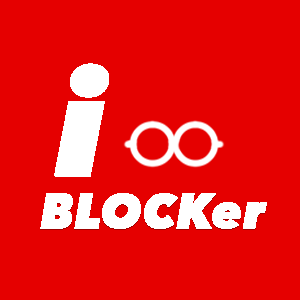
<style>
.page{position:relative;width:300px;height:300px;background:#e50000}
.page>*{position:absolute;margin:0}
.t1{font:140.1px "AvenirNext-HeavyItalic";color:#ffffff;font-weight:bold;scale:1.08 1}
.t2{font:48.6px "AvenirNext-HeavyItalic";color:#ffffff;font-weight:bold}
</style>
<div class="page">
<p class="t1" style="left:54px;top:63px;width:55px;height:114px">i</p>
<p class="t2" style="left:40px;top:193px;width:227px;height:36px">BLOCKer</p>
</div>
